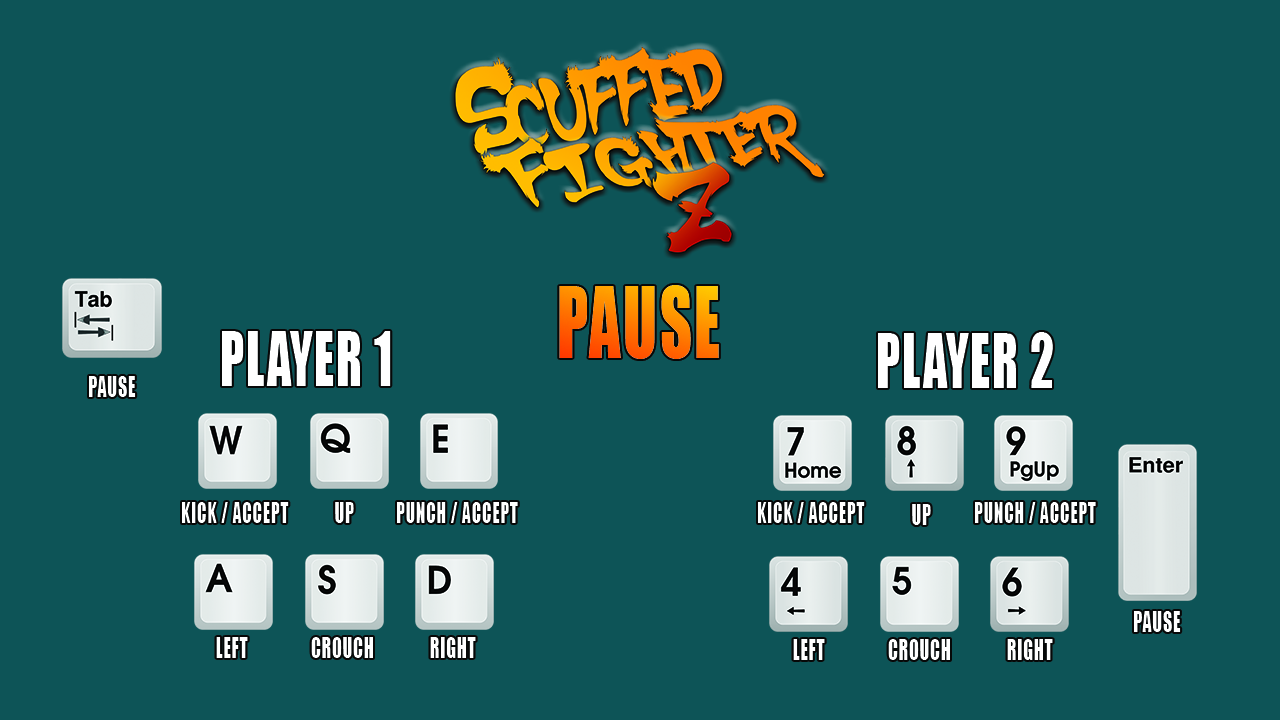
<style>
.page{position:relative;width:1280px;height:720px;background:#0d5457}
.page>*{position:absolute;margin:0}
.t1{font:70px "Impact";letter-spacing:0.04em;color:#ffffff;scale:0.68 1}
.t2{font:16.8px/175px "Impact";letter-spacing:0.04em;color:#ffffff;scale:0.68 1}
.t3{font:26.4px "Impact";letter-spacing:0.04em;color:#ffffff;scale:0.68 1}
.t4{font:25.7px "Impact";letter-spacing:0.04em;color:#ffffff;scale:0.68 1}
</style>
<div class="page">
<p class="t1" style="left:222px;top:331px;width:169px;height:55px">PLAYER 1</p>
<p class="t2" style="left:878px;top:332px;width:175px;height:56px;text-align:center">PLAYER 2</p>
<p class="t3" style="left:89px;top:376px;width:47px;height:21px">PAUSE</p>
<p class="t4" style="left:182px;top:502px;width:107px;height:21px">KICK / ACCEPT</p>
<p class="t3" style="left:335px;top:502px;width:19px;height:21px">UP</p>
<p class="t4" style="left:397px;top:502px;width:121px;height:21px">PUNCH / ACCEPT</p>
<p class="t4" style="left:758px;top:502px;width:107px;height:21px">KICK / ACCEPT</p>
<p class="t3" style="left:912px;top:504px;width:19px;height:21px">UP</p>
<p class="t4" style="left:975px;top:502px;width:121px;height:21px">PUNCH / ACCEPT</p>
<p class="t3" style="left:1134px;top:611px;width:47px;height:21px">PAUSE</p>
<p class="t3" style="left:216px;top:637px;width:32px;height:21px">LEFT</p>
<p class="t3" style="left:311px;top:637px;width:62px;height:21px">CROUCH</p>
<p class="t3" style="left:430px;top:637px;width:46px;height:21px">RIGHT</p>
<p class="t3" style="left:793px;top:639px;width:32px;height:21px">LEFT</p>
<p class="t3" style="left:888px;top:639px;width:62px;height:21px">CROUCH</p>
<p class="t3" style="left:1007px;top:639px;width:46px;height:21px">RIGHT</p>
</div>
